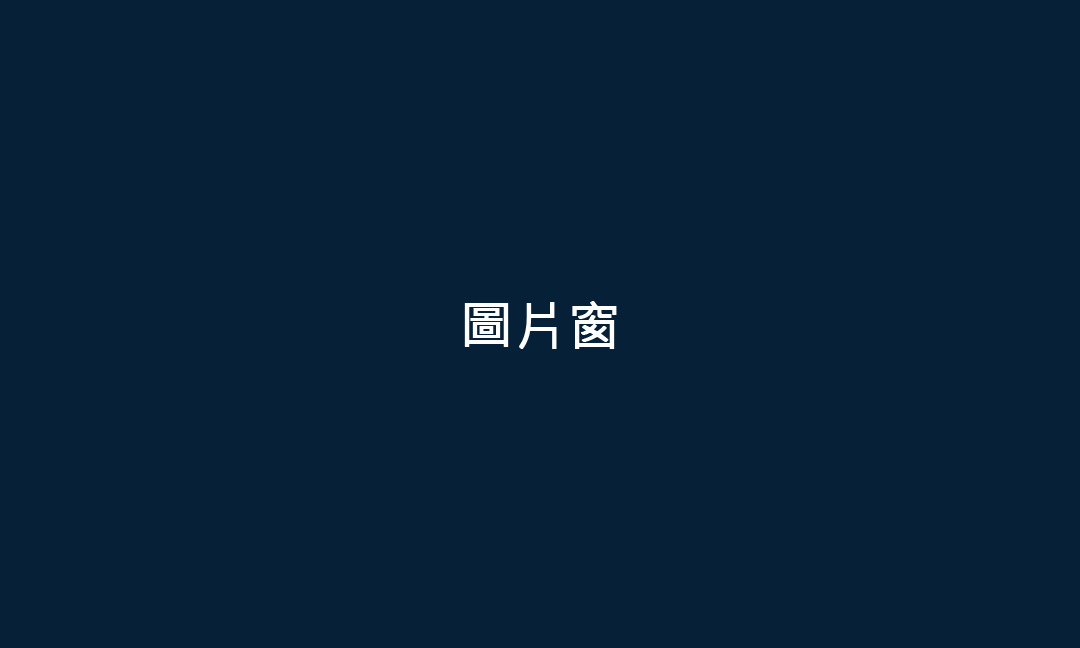
<style>
.page{position:relative;width:1080px;height:648px;background:#062038}
.page>*{position:absolute;margin:0}
.t1{font:52.8px "MicrosoftJhengHeiRegular";color:#ffffff;font-weight:bold}
</style>
<div class="page">
<p class="t1" style="left:464px;top:301px;width:153px;height:48px">圖片窗</p>
</div>
